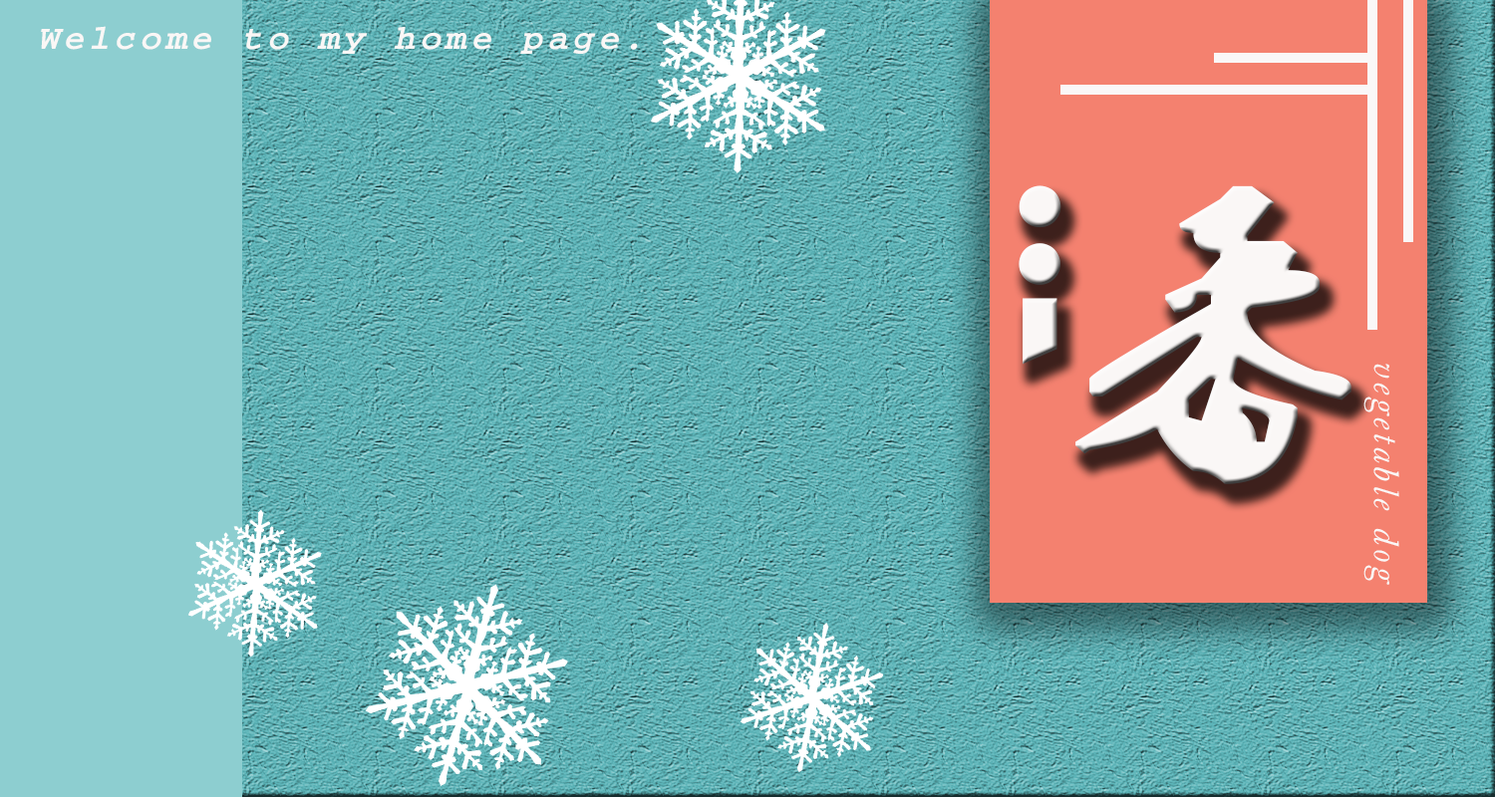
<style>
.page{position:relative;width:1495px;height:797px}
.page>*{position:absolute;margin:0}
.t1{font:34.9px "HGBKHX_CNKI";letter-spacing:0.13em;color:#faf7f6}
.t2{font:199.4px "JLinXin";letter-spacing:0.13em;color:#faf7f6}
.t3{font:299.1px "Ò¶¸ùÓÑÃ«±ÊÐÐÊé";letter-spacing:0.13em;color:#faf7f6}
.t4{font:34.9px/44.3px "HGB2X_CNKI";letter-spacing:0.13em;color:#faf7f6}
</style>
<div class="page">
<p class="t1" style="left:41px;top:26px;width:597px;height:28px">Welcome to my home page.</p>
<p class="t2" style="left:1019px;top:185px;width:43px;height:180px">氵</p>
<p class="t3" style="left:1076px;top:185px;width:276px;height:299px">番</p>
<p class="t4" style="left:1364px;top:364px;width:36px;height:221px;text-align:center">vegetable dog</p>
</div>
